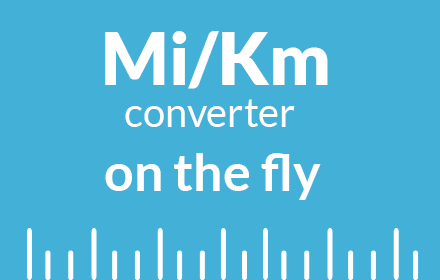
<style>
.page{position:relative;width:440px;height:280px;background:#43b0d8}
.page>*{position:absolute;margin:0}
.t1{font:72px "Lato-Black";color:#ffffff}
.t2{font:40px "Lato-Regular";color:#ffffff}
.t3{font:52px "Lato-Bold";color:#ffffff}
</style>
<div class="page">
<p class="t1" style="left:105px;top:31px;width:223px;height:58px">Mi/Km</p>
<p class="t2" style="left:125px;top:99px;width:170px;height:28px">converter</p>
<p class="t3" style="left:105px;top:153px;width:216px;height:47px">on the fly</p>
</div>
